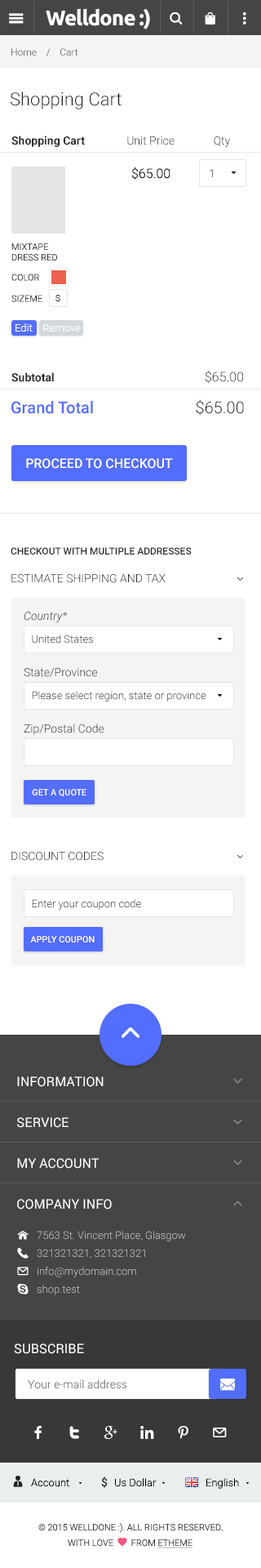
<style>
.page{position:relative;width:261px;height:1568px;background:#ffffff}
.page>*{position:absolute;margin:0}
.t1{font:21.2px "Ubuntu-Bold";letter-spacing:-0.04em;color:#ffffff}
.t2{font:9.8px "Roboto-Light"}
.t3{font:18px "Roboto-Light";color:#212121}
.t4{font:11.4px "Roboto-Light";color:#2b2b2b}
.t5{font:11.4px "Roboto-Bold";color:#2b2b2b}
.t6{font:13.1px "Roboto-Light";color:#212121}
.t7{font:10.6px "Roboto-Light"}
.t8{font:9px/10.6px "Roboto-Light";color:#2b2b2b;text-transform:uppercase}
.t9{font:9px/21.2px "Roboto-Light";color:#2b2b2b;text-transform:uppercase}
.t10{font:9px "Roboto-Light";color:#2b2b2b}
.t11{font:10.6px "Roboto-Light";color:#ffffff}
.t12{font:16.3px "Roboto-Medium";color:#536dfe}
.t13{font:16.3px "Roboto-Light";color:#212121}
.t14{font:13.1px "Roboto-Medium";color:#ffffff;text-transform:uppercase}
.t15{font:9.8px "Roboto-Medium";color:#2b2b2b;text-transform:uppercase}
.t16{font:11.4px "Roboto-Light";color:#2b2b2b;text-transform:uppercase}
.t17{font:10.6px/22.9px "Roboto-Light";color:#2b2b2b}
.t18{font:11.4px "Roboto-LightItalic";color:#2b2b2b}
.t19{font:11.4px/19.6px "Roboto-Light";color:#2b2b2b}
.t20{font:8.9px "Roboto-Medium";color:#ffffff;text-transform:uppercase}
.t21{font:10.6px "Roboto-Light";color:#2b2b2b}
.t22{font:13.1px/40.8px "Roboto-Regular";color:#ffffff;text-transform:uppercase}
.t23{font:10.6px/18px "Roboto-Light";color:#bbbbbb}
.t24{font:13.1px "Roboto-Regular";color:#ffffff;text-transform:uppercase}
.t25{font:11.4px "Roboto-Light";color:#848484}
.t26{font:10.6px "Roboto-Light";color:#000000}
.t27{font:11.4px "Roboto-Regular";color:#212121}
.t28{font:9px "Roboto-Light";color:#2b2b2b;text-transform:uppercase}
</style>
<div class="page">
<p class="t1" style="left:46px;top:8px;width:104px;height:21px">Welldone :)</p>
<p class="t2" style="left:11px;top:48px;width:67px;height:8px">Home    /    Cart</p>
<p class="t3" style="left:11px;top:91px;width:111px;height:18px">Shopping Cart</p>
<p class="t4" style="left:11px;top:136px;width:219px;height:11px"><span class="t5">Shopping Cart </span>              Unit Price              Qty</p>
<p class="t6" style="left:131px;top:167px;width:40px;height:13px">$65.00</p>
<p class="t7" style="left:210px;top:169px;width:3px;height:8px">1</p>
<p class="t8" style="left:11px;top:243px;width:46px;height:18px">Mixtape <br>Dress Red</p>
<p class="t9" style="left:11px;top:274px;width:31px;height:28px">Color<br>SizeMe</p>
<p class="t10" style="left:56px;top:295px;width:4px;height:6px">S</p>
<p class="t11" style="left:16px;top:323px;width:65px;height:9px">Edit    Remove</p>
<p class="t5" style="left:11px;top:371px;width:232px;height:12px">Subtotal           <span class="t6">$65.00</span></p>
<p class="t12" style="left:11px;top:399px;width:233px;height:16px">Grand Total                         <span class="t13">$65.00</span></p>
<p class="t14" style="left:26px;top:458px;width:147px;height:11px">Proceed to Checkout</p>
<p class="t15" style="left:11px;top:547px;width:181px;height:8px">Checkout with Multiple Addresses</p>
<p class="t16" style="left:11px;top:574px;width:155px;height:9px">Estimate Shipping and Tax</p>
<p class="t17" style="left:24px;top:612px;width:183px;height:123px"><span class="t18">Country*<br></span>   United States<br><br><span class="t19">State/Province<br></span>   Please select region, state or province<br><br><span class="t19">Zip/Postal Code</span></p>
<p class="t20" style="left:32px;top:789px;width:55px;height:8px">Get a Quote</p>
<p class="t16" style="left:11px;top:852px;width:93px;height:9px">Discount Codes</p>
<p class="t21" style="left:32px;top:899px;width:109px;height:11px">Enter your coupon code</p>
<p class="t20" style="left:30px;top:936px;width:65px;height:6px">Apply Coupon</p>
<p class="t22" style="left:17px;top:1076px;width:95px;height:133px">Information<br>service<br>My account<br>Company Info</p>
<p class="t23" style="left:37px;top:1231px;width:148px;height:64px">7563 St. Vincent Place, Glasgow<br>321321321, 321321321<br>info@mydomain.com<br>shop.test</p>
<p class="t24" style="left:14px;top:1343px;width:70px;height:11px">Subscribe</p>
<p class="t25" style="left:28px;top:1379px;width:99px;height:10px">Your e-mail address</p>
<p class="t26" style="left:31px;top:1478px;width:38px;height:9px">Account</p>
<p class="t27" style="left:101px;top:1477px;width:7px;height:11px">$</p>
<p class="t26" style="left:115px;top:1478px;width:42px;height:9px">Us Dollar</p>
<p class="t26" style="left:207px;top:1478px;width:32px;height:11px">English</p>
<p class="t28" style="left:38px;top:1523px;width:185px;height:10px">© 2015 Welldone :). All Rights Reserved.</p>
</div>
